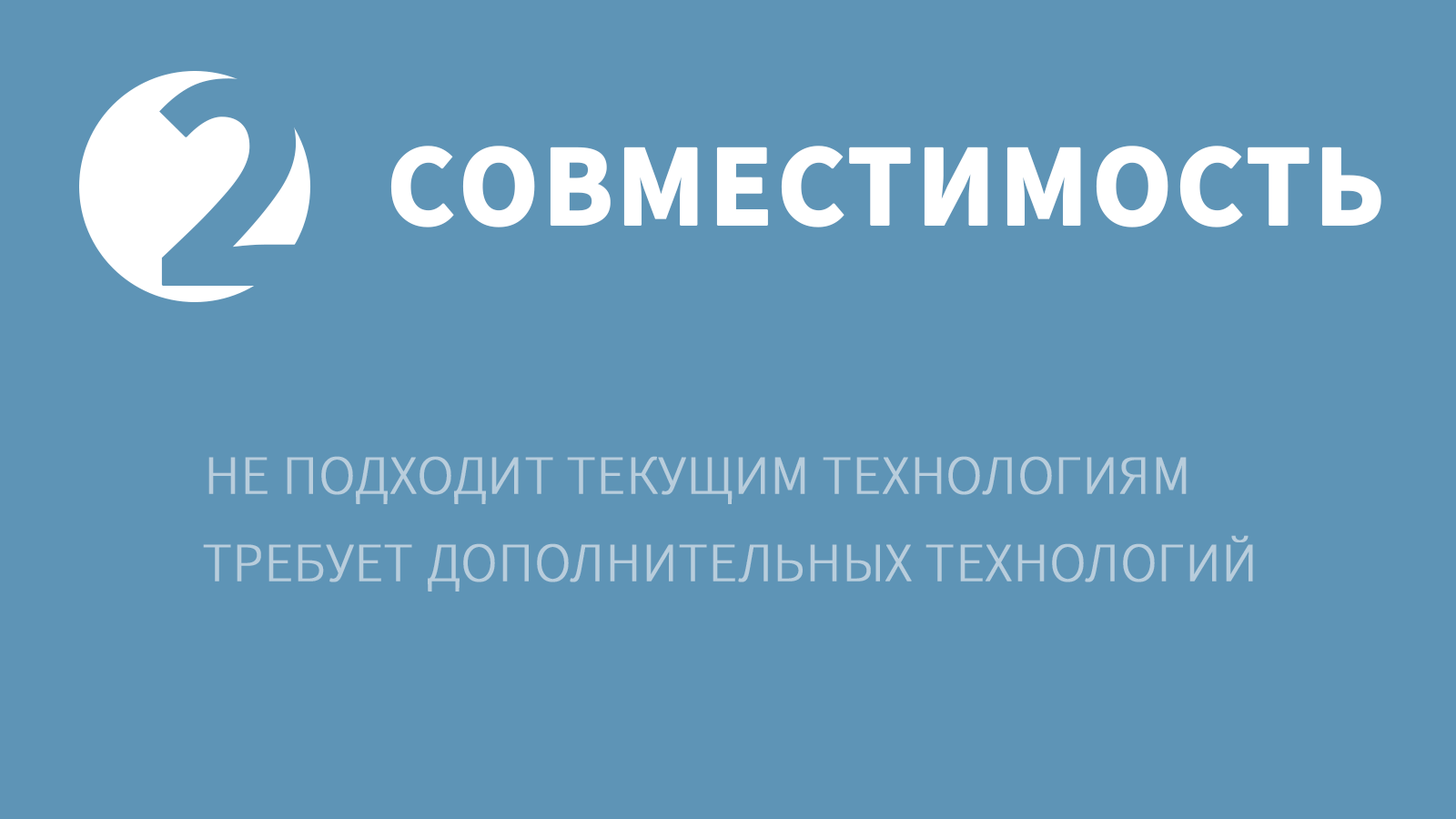
<style>
.page{position:relative;width:1456px;height:819px;background:#5e94b6}
.page>*{position:absolute;margin:0}
.t1{font:317.8px "SourceSansPro-Bold";color:#5e94b6;text-transform:uppercase;font-weight:bold}
.t2{font:117.8px "SourceSansPro-Bold";color:#ffffff;text-transform:uppercase;font-weight:bold}
.t3{font:54.6px "SourceSansPro-Light";color:#b8cddc;text-transform:uppercase;font-weight:bold}
</style>
<div class="page">
<p class="t1" style="left:159px;top:78px;width:147px;height:208px">2</p>
<p class="t2" style="left:390px;top:146px;width:991px;height:81px">Совместимость</p>
<p class="t3" style="left:208px;top:456px;width:979px;height:48px">Не подходит текущим технологиям</p>
<p class="t3" style="left:203px;top:535px;width:1050px;height:56px">Требует дополнительных технологий</p>
</div>
